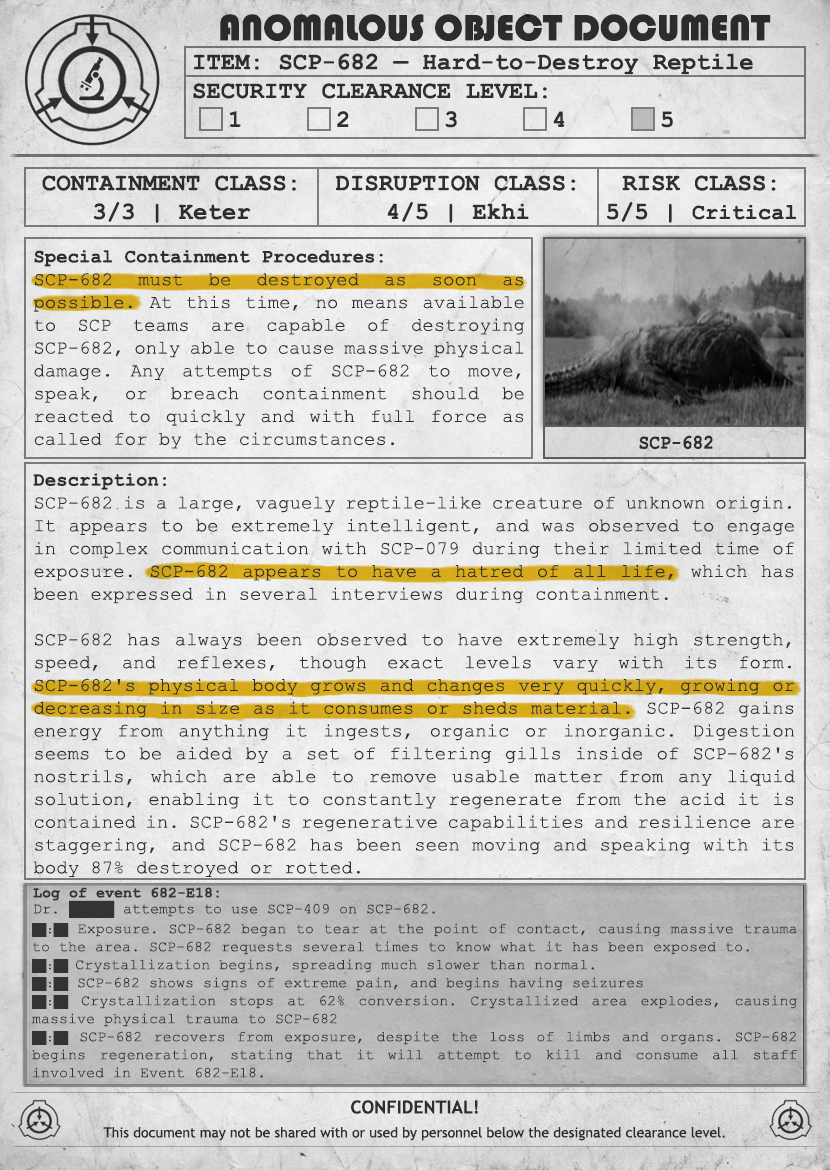
<style>
.page{position:relative;width:830px;height:1170px}
.page>*{position:absolute;margin:0}
.t1{font:38px "Bauhaus93";color:#333333;text-transform:uppercase}
.t2{font:24px "CourierNewPS-BoldMT";color:#333333}
.t3{font:24px "CourierNewPS-BoldMT";color:#333333;text-transform:uppercase}
.t4{font:22px "CourierNewPS-BoldMT";color:#333333}
.t5{font:19px "CourierNewPSMT";color:#333333}
.t6{font:19px "CourierNewPS-BoldMT";color:#333333}
.t7{font:20.1px "CourierNewPS-BoldMT";color:#333333;scale:0.9 1}
.t8{font:15px/16px "CourierNewPSMT";color:#333333}
.t9{font:15px/16px "CourierNewPS-BoldMT";color:#333333}
.t10{font:15px/18px "CourierNewPSMT";color:#333333}
.t11{font:12px/18px "CourierNewPSMT";color:#333333}
.t12{font:14px/24px "TrebuchetMS";color:#333333}
.t13{font:18px/24px "TrebuchetMS-Bold";color:#333333}
</style>
<div class="page">
<p class="t1" style="left:220px;top:14px;width:551px;height:27px">anomalous object document</p>
<p class="t2" style="left:193px;top:53px;width:560px;height:75px">ITEM: SCP-682 — Hard-to-Destroy Reptile<br><span class="t3">Security CLEARANCE LEVEL:</span> <br> 1   2   3   4   5</p>
<p class="t2" style="left:42px;top:175px;width:254px;height:48px;text-align:center">CONTAINMENT CLASS:<br>3/3 | Keter</p>
<p class="t2" style="left:335px;top:175px;width:241px;height:48px;text-align:center">DISRUPTION CLASS:<br>4/5 | Ekhi</p>
<p class="t2" style="left:607px;top:175px;width:190px;height:48px;text-align:center">RISK CLASS:<br>5/5 | <span class="t4">Critical</span></p>
<p class="t5" style="left:33px;top:250px;width:492px;height:199px;text-align:justify"><span class="t6">Special Containment Procedures:<br></span>SCP-682 must be destroyed as soon as possible. At this time, no means available to SCP teams are capable of destroying SCP-682, only able to cause massive physical damage. Any attempts of SCP-682 to move, speak, or breach containment should be reacted to quickly and with full force as called for by the circumstances.</p>
<p class="t7" style="left:639px;top:435px;width:74px;height:15px">SCP-682</p>
<p class="t5" style="left:33px;top:473px;width:762px;height:404px;text-align:justify"><span class="t6">Description:<br></span>SCP-682 is a large, vaguely reptile-like creature of unknown origin. It appears to be extremely intelligent, and was observed to engage in complex communication with SCP-079 during their limited time of exposure. SCP-682 appears to have a hatred of all life, which has been expressed in several interviews during containment.<br><br>SCP-682 has always been observed to have extremely high strength, speed, and reflexes, though exact levels vary with its form. SCP-682's physical body grows and changes very quickly, growing or decreasing in size as it consumes or sheds material. SCP-682 gains energy from anything it ingests, organic or inorganic. Digestion seems to be aided by a set of filtering gills inside of SCP-682's nostrils, which are able to remove usable matter from any liquid solution, enabling it to constantly regenerate from the acid it is contained in. SCP-682's regenerative capabilities and resilience are staggering, and SCP-682 has been seen moving and speaking with its body 87% destroyed or rotted.</p>
<p class="t8" style="left:33px;top:887px;width:402px;height:31px;text-align:justify"><span class="t9">Log of event 682-E18:</span> <br>Dr. █████ attempts to use SCP-409 on SCP-682.</p>
<p class="t10" style="left:32px;top:923px;width:765px;height:155px;text-align:justify"><span class="t11">██:██</span> Exposure. SCP-682 began to tear at the point of contact, causing massive trauma to the area. SCP-682 requests several times to know what it has been exposed to.<br><span class="t11">██:██ </span>Crystallization begins, spreading much slower than normal.<br><span class="t11">██:██</span> SCP-682 shows signs of extreme pain, and begins having seizures<br><span class="t11">██:██</span> Crystallization stops at 62% conversion. Crystallized area explodes, causing massive physical trauma to SCP-682<br><span class="t11">██:██</span> SCP-682 recovers from exposure, despite the loss of limbs and organs. SCP-682 begins regeneration, stating that it will attempt to kill and consume all staff involved in Event 682-E18.</p>
<p class="t12" style="left:103px;top:1100px;width:622px;height:41px;text-align:center"><span class="t13">CONFIDENTIAL!<br></span>This document may not be shared with or used by personnel below the designated clearance level.</p>
</div>
